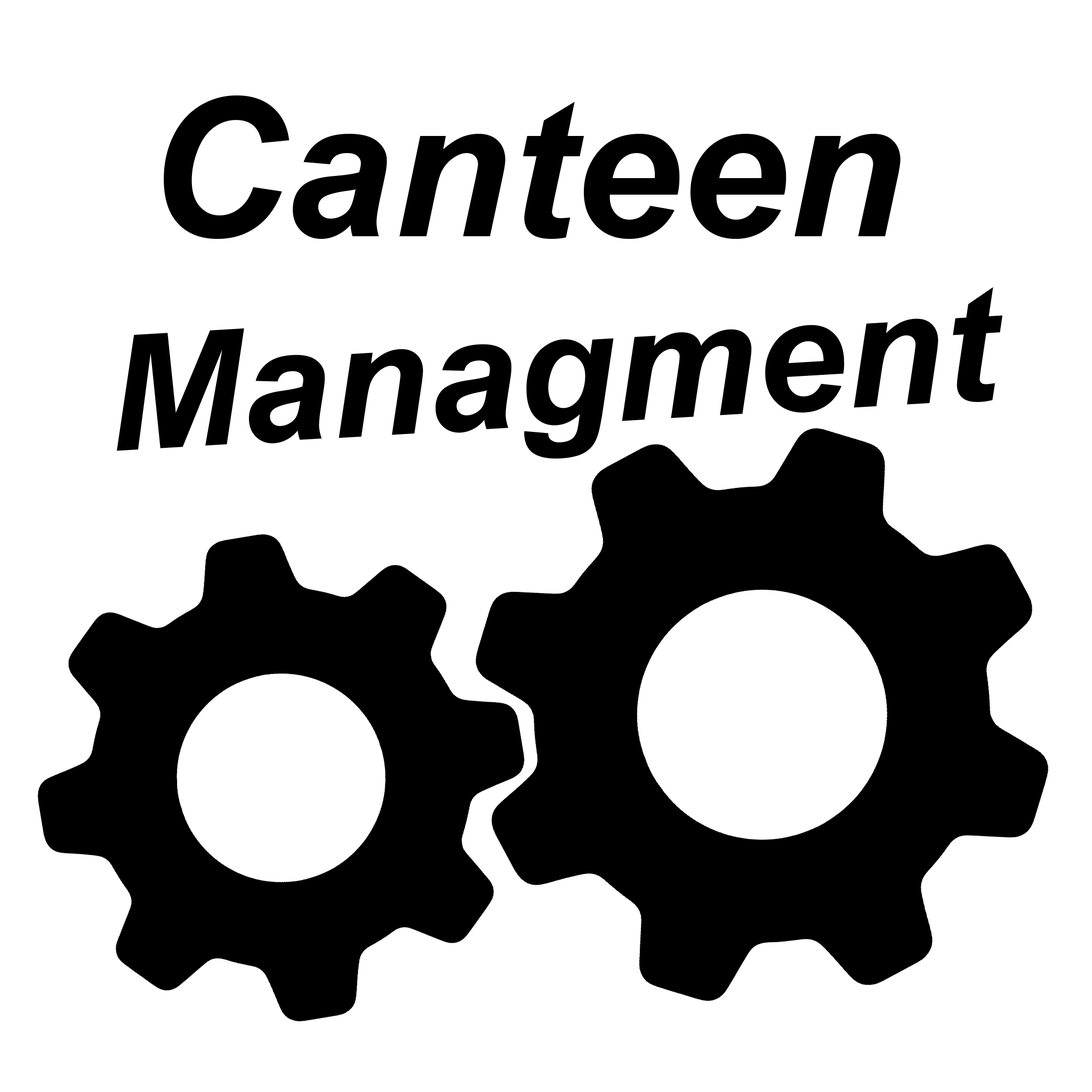
<style>
.page{position:relative;width:1092px;height:1092px;background:#ffffff}
.page>*{position:absolute;margin:0}
.t1{font:192.2px "Arial-BoldItalicMT";color:#000000}
.t2{font:160.1px "Arial-BoldItalicMT";color:#000000}
</style>
<div class="page">
<p class="t1" style="left:164px;top:95px;width:737px;height:144px">Canteen</p>
<p class="t2" style="left:117px;top:287px;width:885px;height:172px;rotate:-3deg">Managment</p>
</div>
